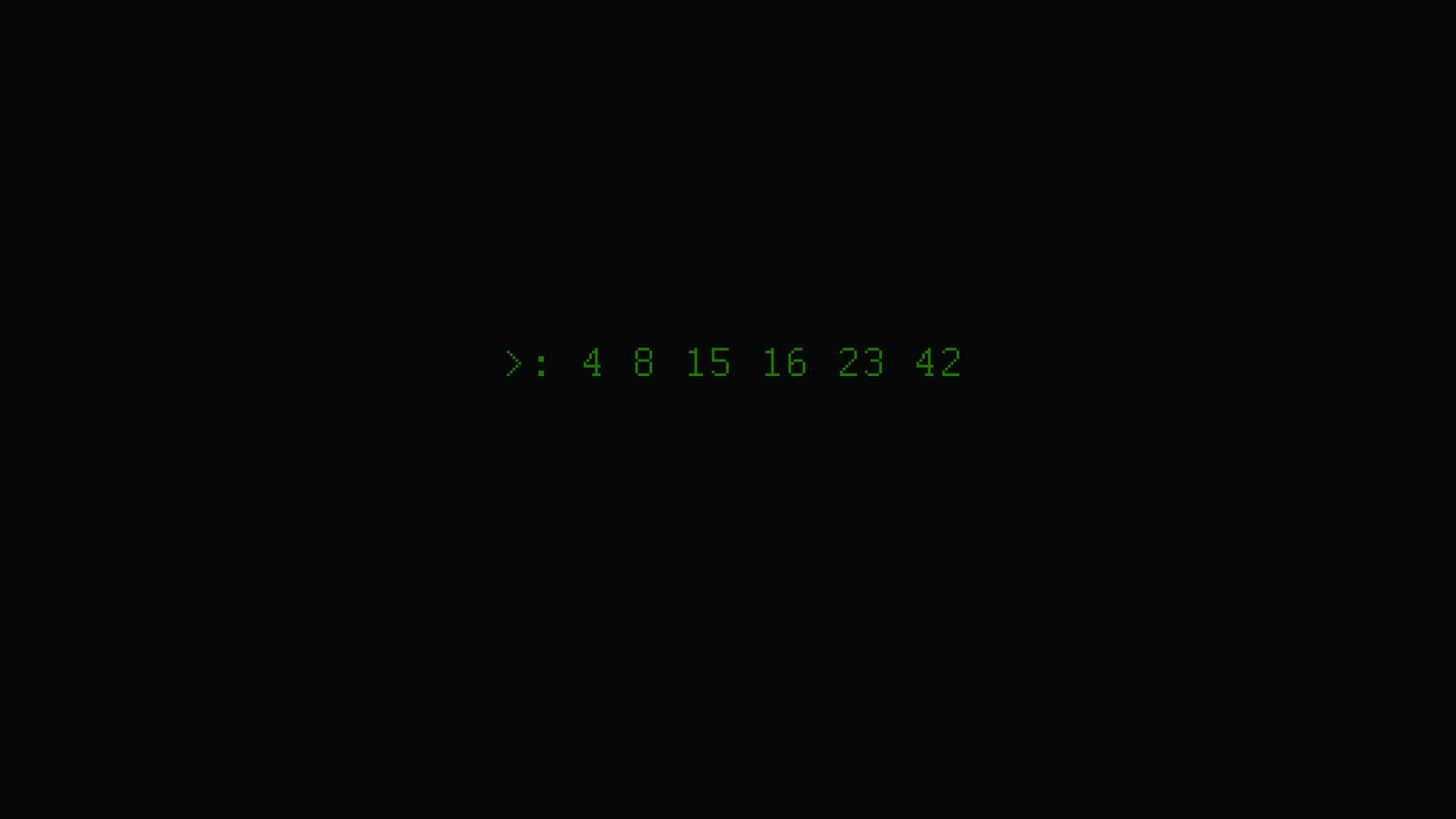
<style>
.page{position:relative;width:1456px;height:819px;background:#060808}
.page>*{position:absolute;margin:0}
.t1{font:45.5px "Courier";color:#1e7700}
.t2{font:13.6px "MyriadPro-Regular";color:#1e7700}
</style>
<div class="page">
<p class="t1" style="left:507px;top:347px;width:452px;height:29px"><span class="t2"><br><br></span>&gt;: 4 8 15 16 23 42</p>
</div>
